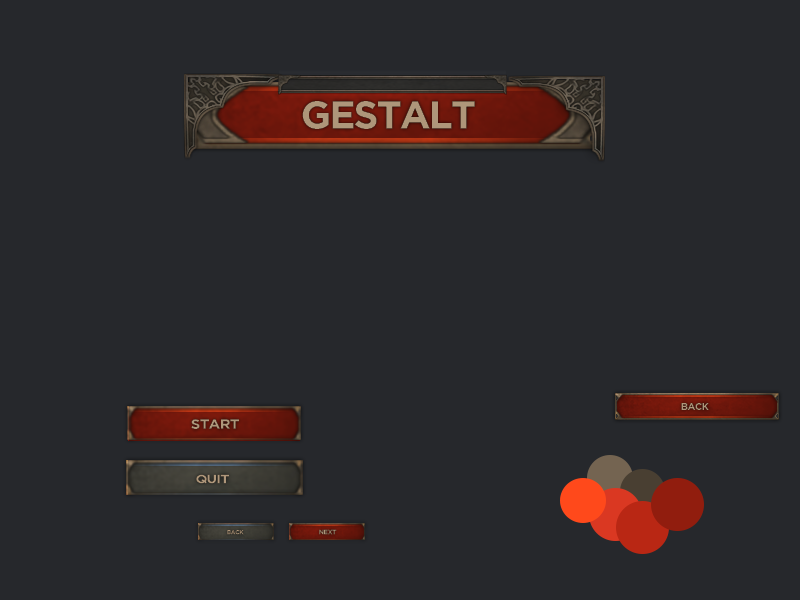
<style>
.page{position:relative;width:800px;height:600px;background:#26282c}
.page>*{position:absolute;margin:0}
.t1{font:38.7px "Gotham-Bold";letter-spacing:-0.05em;color:#ae967a;text-transform:uppercase}
.t2{font:10px "Gotham-Bold";letter-spacing:-0.05em;color:#ae967a;text-transform:uppercase}
.t3{font:13.4px "Gotham-Bold";letter-spacing:-0.05em;color:#ae967a;text-transform:uppercase;scale:1.12 1}
.t4{font:12.1px "Gotham-Bold";letter-spacing:-0.05em;color:#ae967a;text-transform:uppercase;scale:1.15 1}
.t5{font:6px "Gotham-Bold";letter-spacing:-0.05em;color:#ae967a;text-transform:uppercase}
.t6{font:6.6px "Gotham-Bold";letter-spacing:-0.05em;color:#ae967a;text-transform:uppercase}
</style>
<div class="page">
<p class="t1" style="left:302px;top:101px;width:173px;height:28px">GESTALT</p>
<p class="t2" style="left:681px;top:403px;width:28px;height:7px">Back</p>
<p class="t3" style="left:191px;top:419px;width:48px;height:10px">START</p>
<p class="t4" style="left:196px;top:474px;width:33px;height:10px">QUIT</p>
<p class="t5" style="left:227px;top:530px;width:17px;height:5px">Back</p>
<p class="t6" style="left:319px;top:529px;width:18px;height:6px">Next</p>
</div>
